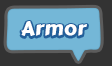
<style>
.page{position:relative;width:112px;height:66px;background:#333333}
.page>*{position:absolute;margin:0}
.t1{font:20px "CarterOne";letter-spacing:0.025em;color:#ffffff}
</style>
<div class="page">
<p class="t1" style="left:21px;top:21px;width:66px;height:15px">Armor</p>
</div>
